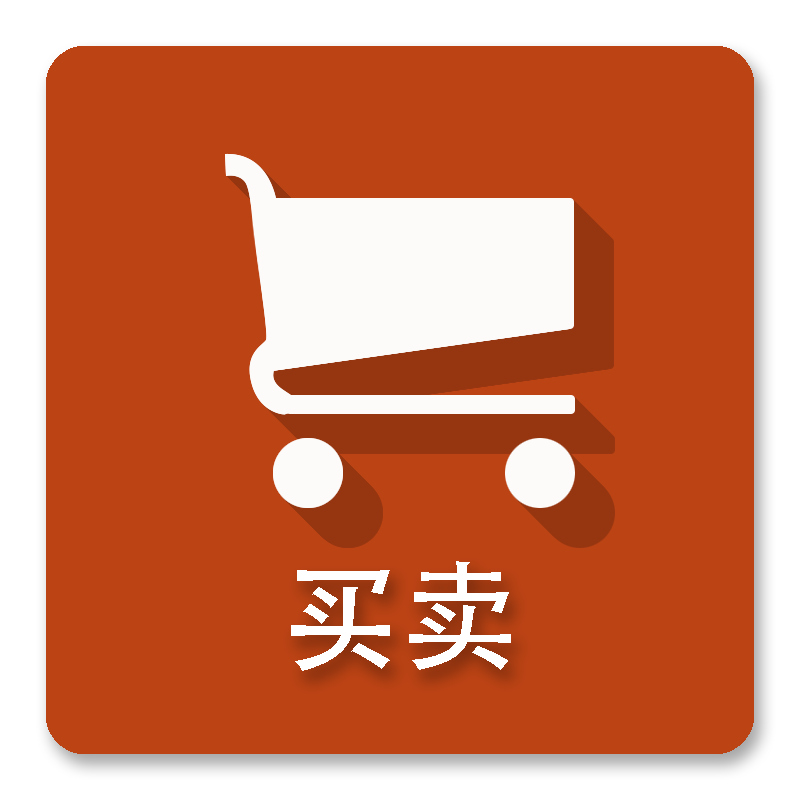
<style>
.page{position:relative;width:800px;height:800px;background:#bc4314}
.page>*{position:absolute;margin:0}
.t1{font:120px "STHeitiSC-Medium";color:#ffffff}
</style>
<div class="page">
<p class="t1" style="left:291px;top:561px;width:220px;height:110px">买卖</p>
</div>
